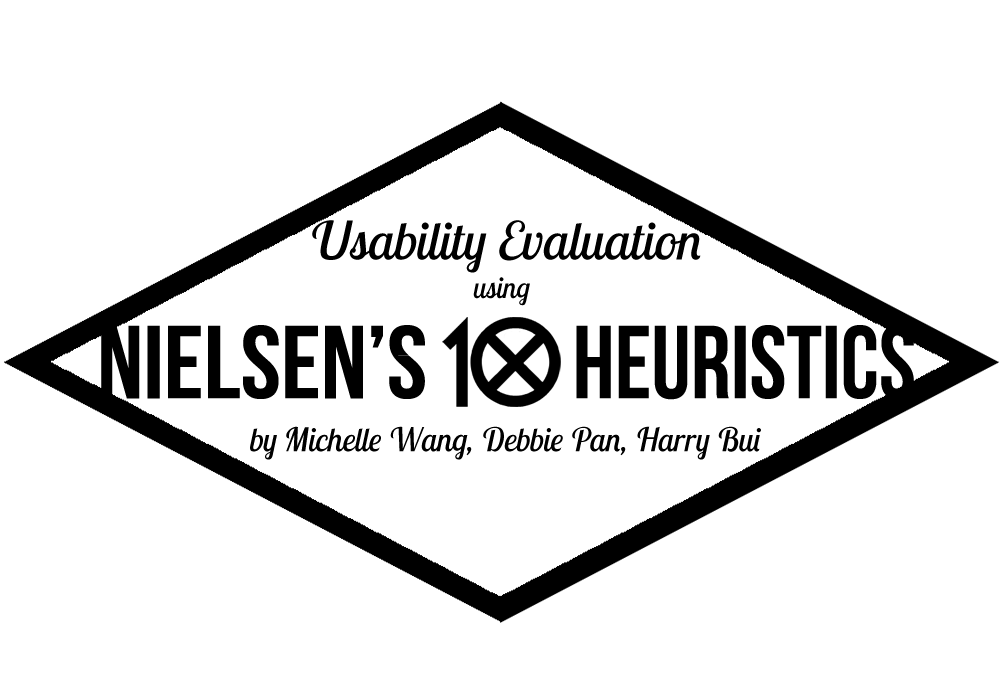
<style>
.page{position:relative;width:1000px;height:700px;background:#ffffff}
.page>*{position:absolute;margin:0}
.t1{font:52.1px "LobsterTwo-Italic";color:#000000}
.t2{font:29.2px "LobsterTwo-Italic";color:#000000}
.t3{font:103.5px "BebasNeue";color:#000000;scale:1.05 1}
.t4{font:103.5px "BebasNeue";color:#000000;scale:0.96 1}
.t5{font:32.6px "LobsterTwo-Italic";color:#000000}
</style>
<div class="page">
<p class="t1" style="left:312px;top:220px;width:389px;height:53px">Usability Evaluation</p>
<p class="t2" style="left:473px;top:277px;width:57px;height:29px">using</p>
<p class="t3" style="left:101px;top:325px;width:324px;height:74px">NIelsen’s</p>
<p class="t4" style="left:576px;top:325px;width:338px;height:75px">Heuristics</p>
<p class="t5" style="left:250px;top:426px;width:511px;height:34px">by Michelle Wang, Debbie Pan, Harry Bui</p>
</div>
